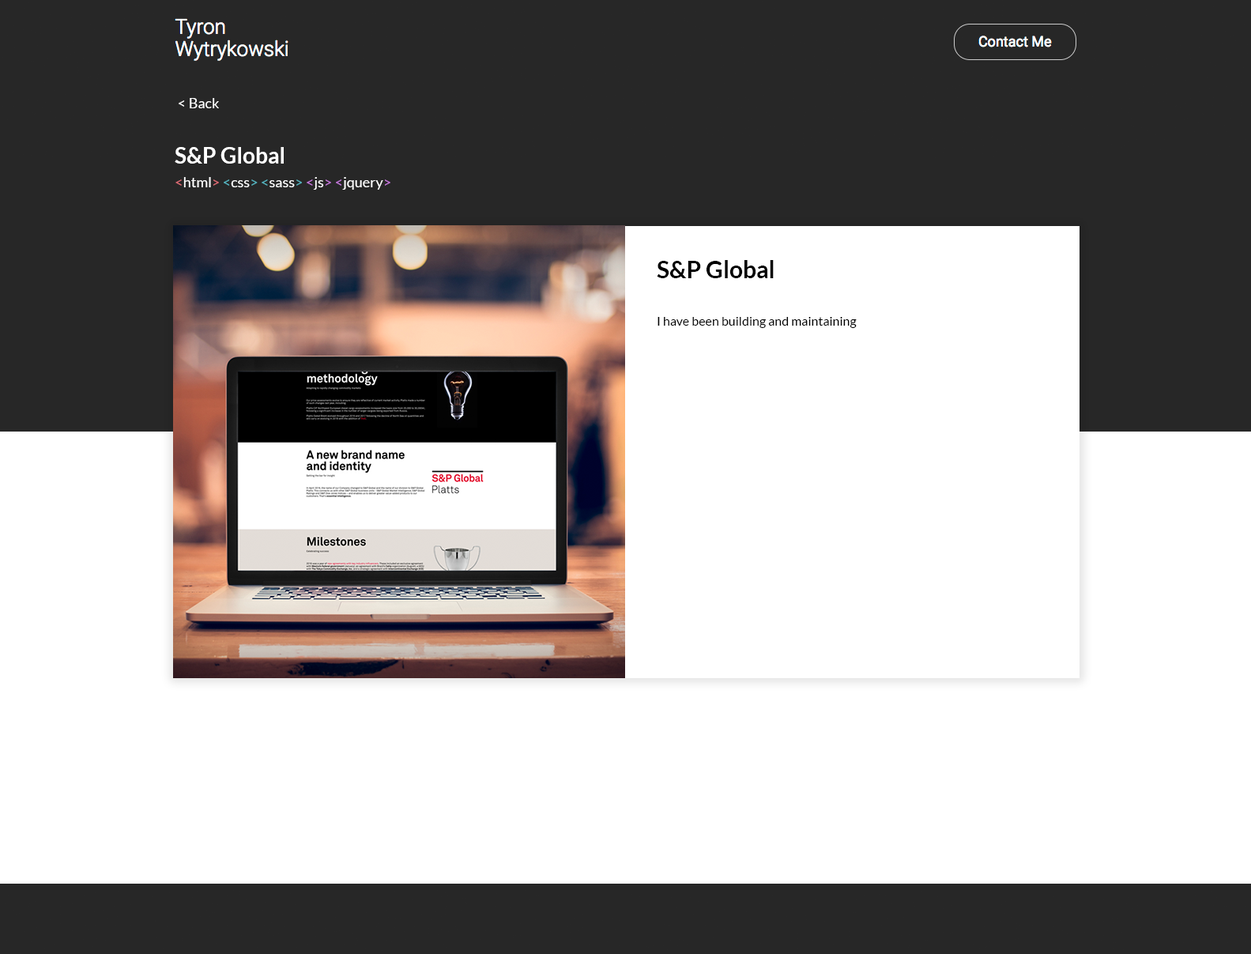
<style>
.page{position:relative;width:1251px;height:954px;background:#ffffff}
.page>*{position:absolute;margin:0}
.t1{font:14.2px "Lato-Regular";color:#ffffff}
.t2{font:22.1px/15.8px "Lato-Bold";color:#ffffff}
.t3{font:14.2px/23.7px "Lato-Regular";color:#e06c75}
.t4{font:14.2px/23.7px "Lato-Regular";color:#ffffff}
.t5{font:14.2px/23.7px "Lato-Regular";color:#56b6c2}
.t6{font:14.2px/23.7px "Lato-Regular";color:#c678dd}
.t7{font:12.6px/23.7px "Lato-Regular";color:#000000}
.t8{font:23.7px/23.7px "Lato-Bold";color:#000000}
</style>
<div class="page">
<p class="t1" style="left:179px;top:98px;width:40px;height:10px">&lt; Back</p>
<p class="t2" style="left:175px;top:147px;width:215px;height:43px">S&amp;P Global<br><span class="t3">&lt;</span><span class="t4">html</span><span class="t3">&gt; </span><span class="t5">&lt;</span><span class="t4">css</span><span class="t5">&gt; &lt;</span><span class="t4">sass</span><span class="t5">&gt; </span><span class="t6">&lt;</span><span class="t4">js</span><span class="t6">&gt; &lt;</span><span class="t4">jquery</span><span class="t6">&gt;</span></p>
<p class="t7" style="left:656px;top:260px;width:200px;height:68px"><span class="t8">S&amp;P Global<br><br></span>I have been building and maintaining</p>
</div>
